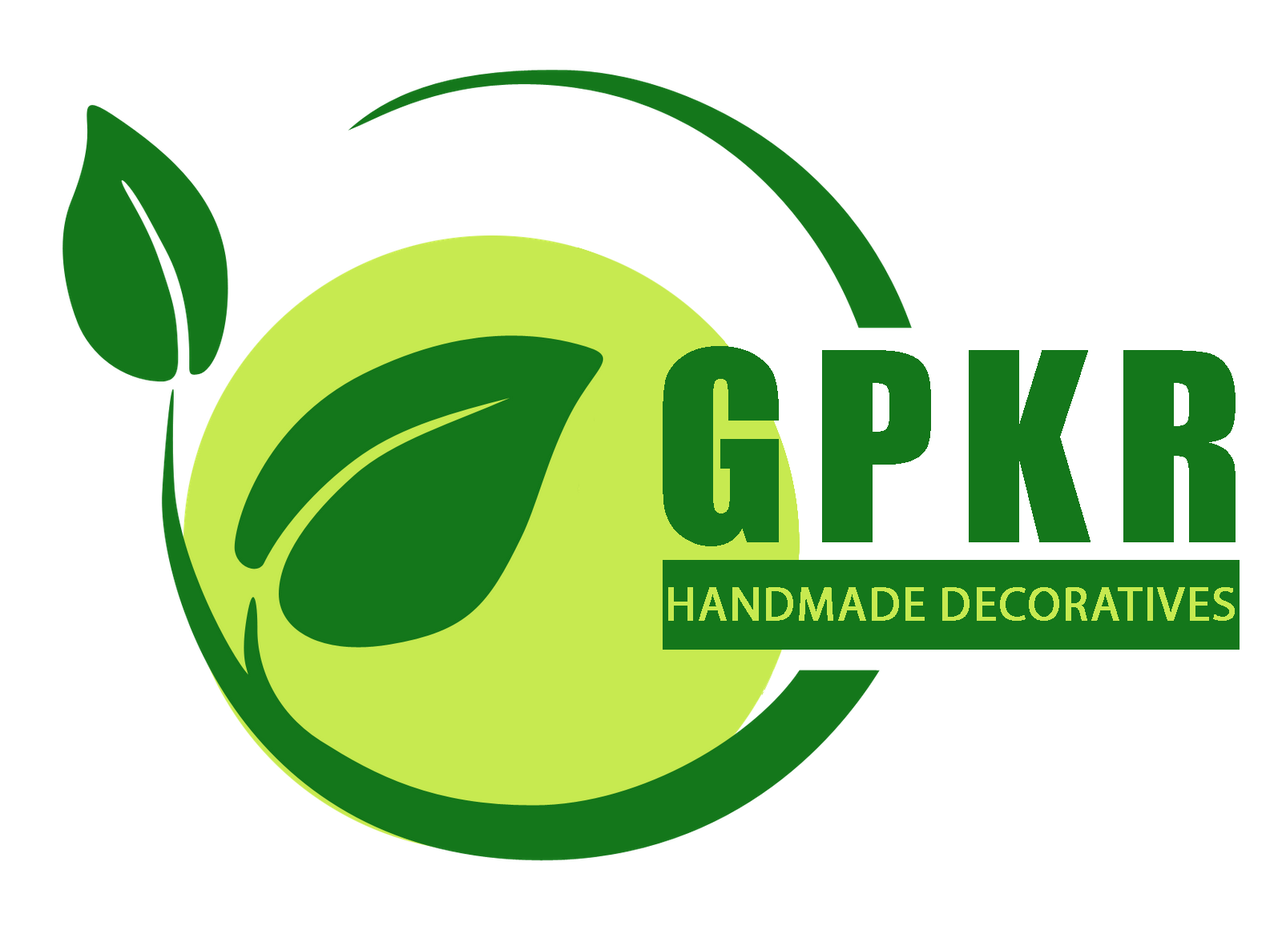
<style>
.page{position:relative;width:1282px;height:930px;background:#ffffff}
.page>*{position:absolute;margin:0}
.t1{font:243.7px "Impact";letter-spacing:0.1em;color:#14771b}
.t2{font:47.9px "MyriadPro-Regular";color:#c7ea50;text-transform:uppercase;font-weight:bold}
</style>
<div class="page">
<p class="t1" style="left:663px;top:346px;width:572px;height:200px">GPKR</p>
<p class="t2" style="left:668px;top:587px;width:567px;height:34px">Handmade Decoratives</p>
</div>
